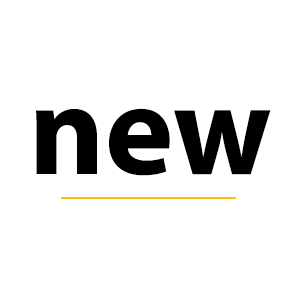
<style>
.page{position:relative;width:302px;height:300px;background:#ffffff}
.page>*{position:absolute;margin:0}
.t1{font:130px "MyriadPro-Bold";color:#000000}
</style>
<div class="page">
<p class="t1" style="left:36px;top:108px;width:235px;height:68px">new</p>
</div>
